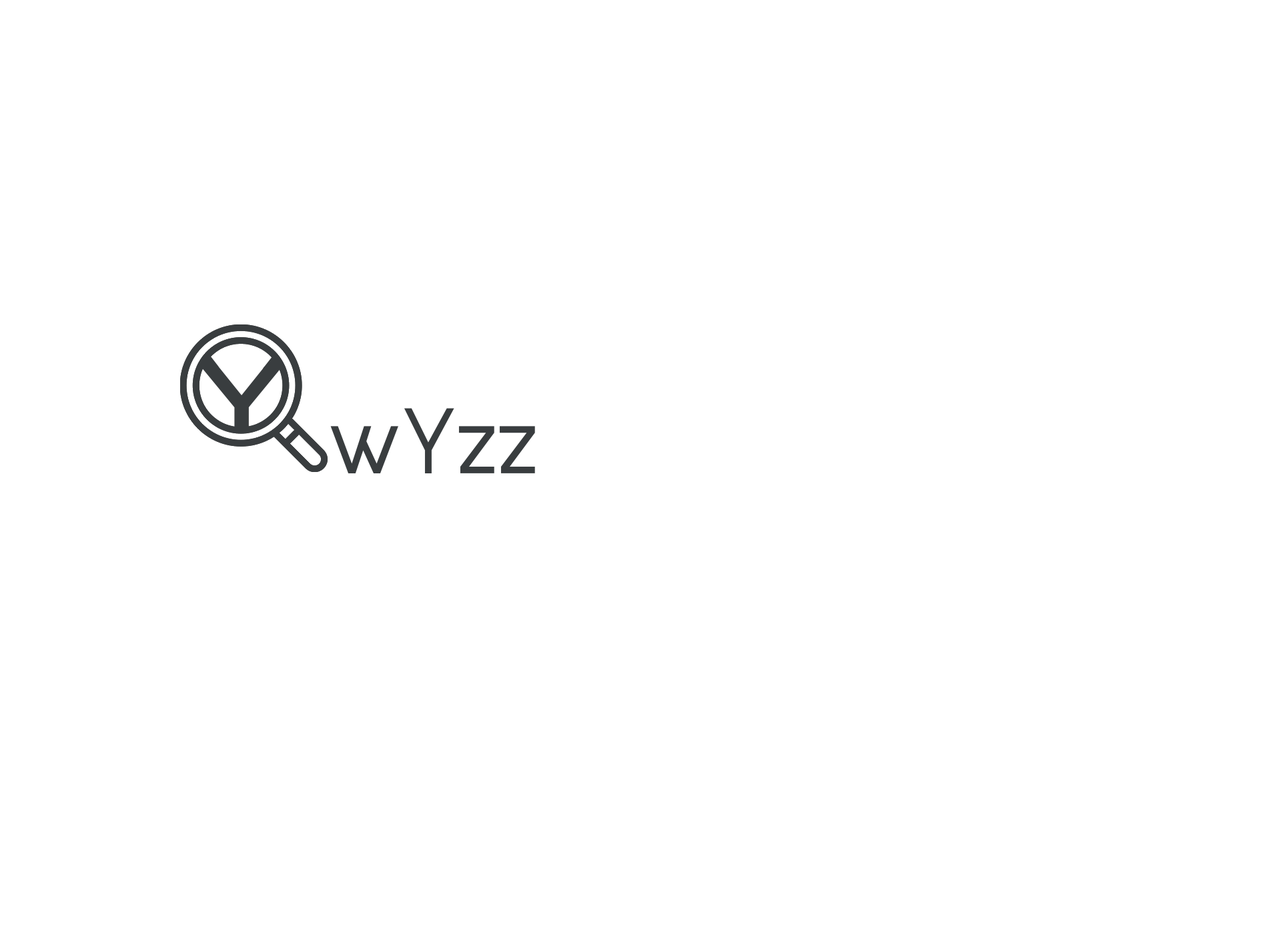
<style>
.page{position:relative;width:1261px;height:946px;background:#ffffff}
.page>*{position:absolute;margin:0}
.t1{font:89px "ZenDots-Regular";color:#393d3f}
.t2{font:89px "Mina-Regular";color:#393d3f}
</style>
<div class="page">
<p class="t1" style="left:201px;top:366px;width:81px;height:64px">Y</p>
<p class="t2" style="left:330px;top:408px;width:205px;height:65px">wYzz</p>
</div>
